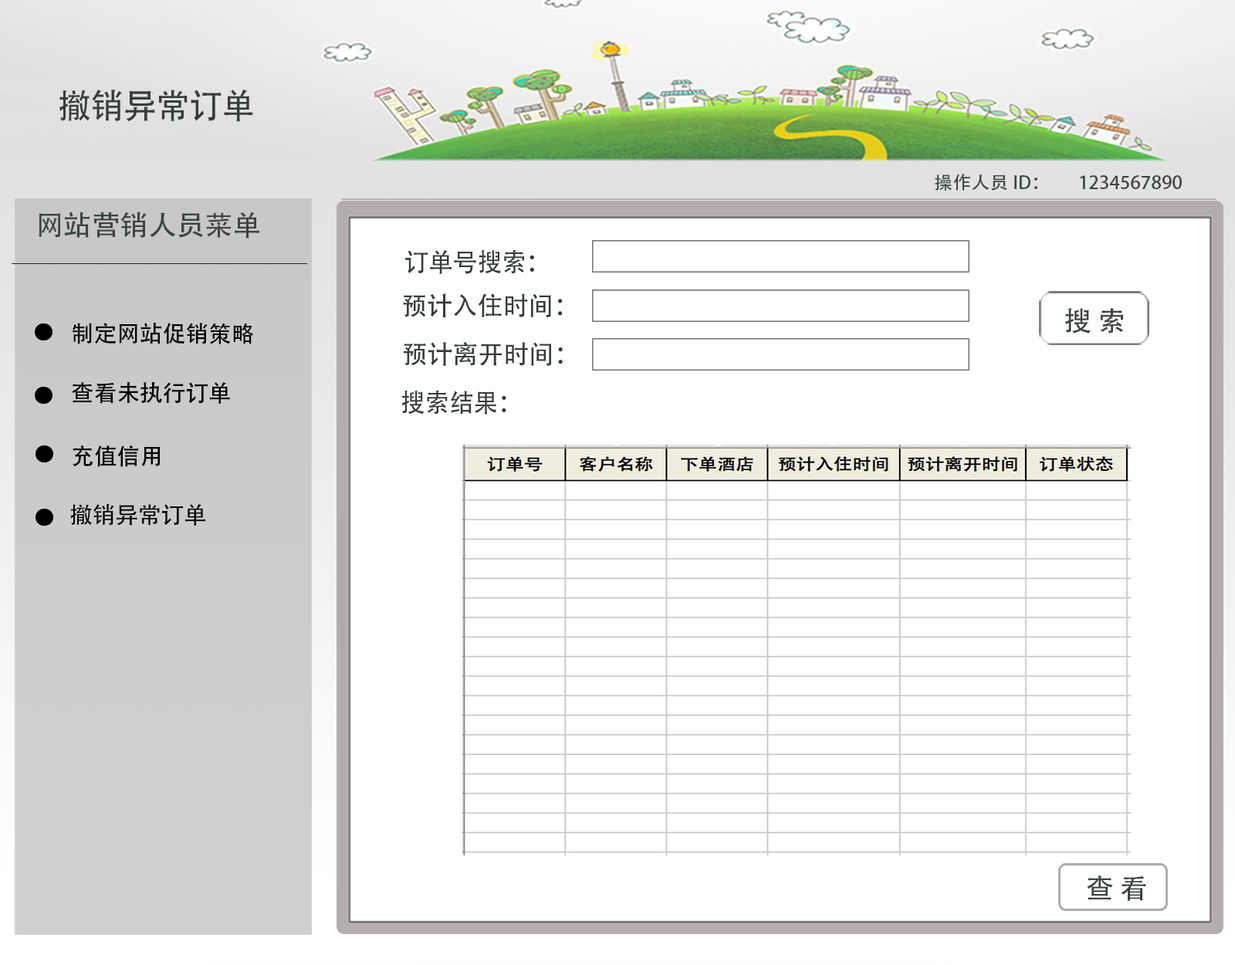
<style>
.page{position:relative;width:1235px;height:965px;background:#ffffff}
.page>*{position:absolute;margin:0}
.t1{font:34.3px "AdobeHeitiStd-Regular";letter-spacing:-0.005em;color:#363c3c;text-transform:uppercase;scale:0.96 1}
.t2{font:17.8px "AdobeHeitiStd-Regular";color:#3b453e;scale:1.04 1}
.t3{font:28.1px "AdobeHeitiStd-Regular";color:#3b453e}
.t4{font:25.5px "AdobeHeitiStd-Regular";letter-spacing:-0.005em;color:#363c3c;text-transform:uppercase;scale:0.96 1}
.t5{font:25.5px "AdobeHeitiStd-Regular";letter-spacing:-0.005em;color:#363c3c;text-transform:uppercase}
.t6{font:22.8px "AdobeHeitiStd-Regular";color:#010101}
.t7{font:22.8px "AdobeHeitiStd-Regular";color:#000000}
.t8{font:22.8px "AdobeHeitiStd-Regular";letter-spacing:-0.005em;color:#000000;text-transform:uppercase}
</style>
<div class="page">
<p class="t1" style="left:59px;top:89px;width:194px;height:33px">撤销异常订单</p>
<p class="t2" style="left:935px;top:174px;width:247px;height:17px">操作人员ID：        1234567890</p>
<p class="t3" style="left:39px;top:212px;width:220px;height:27px">网站营销人员菜单</p>
<p class="t4" style="left:405px;top:249px;width:129px;height:25px">订单号搜索：</p>
<p class="t5" style="left:403px;top:293px;width:160px;height:25px">预计入住时间：</p>
<p class="t6" style="left:73px;top:323px;width:180px;height:21px">制定网站促销策略</p>
<p class="t5" style="left:404px;top:342px;width:159px;height:24px">预计离开时间：</p>
<p class="t7" style="left:72px;top:381px;width:158px;height:23px">查看未执行订单</p>
<p class="t4" style="left:402px;top:390px;width:105px;height:25px">搜索结果：</p>
<p class="t7" style="left:73px;top:446px;width:88px;height:21px">充值信用</p>
<p class="t8" style="left:70px;top:504px;width:135px;height:22px">撤销异常订单</p>
</div>
